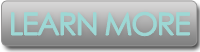
<style>
.page{position:relative;width:200px;height:52px}
.page>*{position:absolute;margin:0}
.t1{font:30.6px "CenturyGothic";letter-spacing:-0.04em;color:#9dd8d5}
</style>
<div class="page">
<p class="t1" style="left:11px;top:12px;width:179px;height:24px">LEARN MORE</p>
</div>
